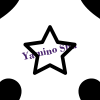
<style>
.page{position:relative;width:100px;height:100px;background:#ffffff}
.page>*{position:absolute;margin:0}
.t1{font:10.8px "BodoniMT-Bold";letter-spacing:0.01em;color:#4a246e}
</style>
<div class="page">
<p class="t1" style="left:21px;top:42px;width:56px;height:18px;rotate:-13deg">Yamino Shu</p>
</div>
